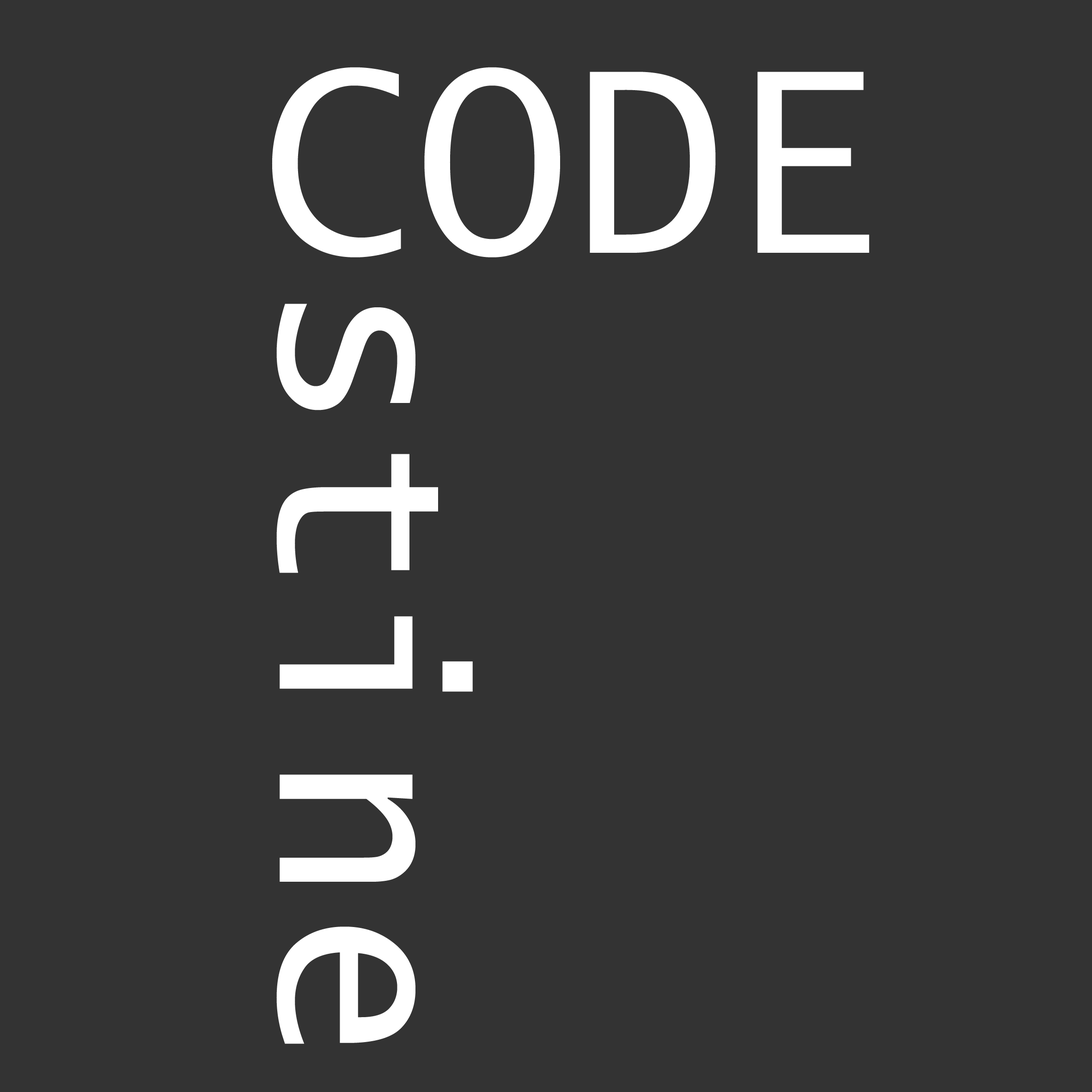
<style>
.page{position:relative;width:1092px;height:1092px;background:#333333}
.page>*{position:absolute;margin:0}
.t1{font:250.3px "LucidaSans-Typewriter";letter-spacing:0.025em;color:#ffffff}
</style>
<div class="page">
<p class="t1" style="left:272px;top:67px;width:597px;height:190px">CODE</p>
<p class="t1" style="left:276px;top:304px;width:197px;height:740px;rotate:90deg">stine</p>
</div>
